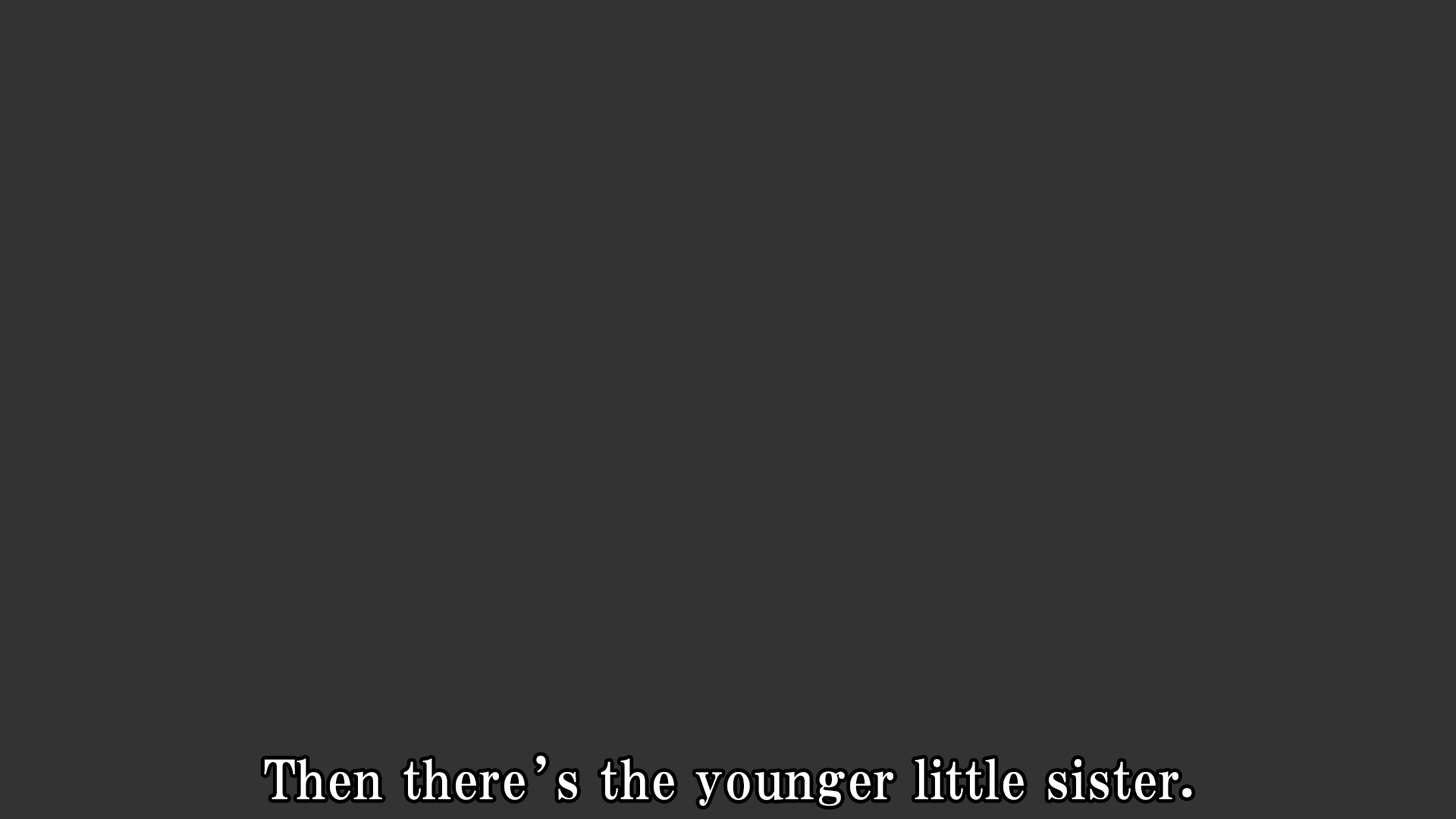
<style>
.page{position:relative;width:1456px;height:819px;background:#333333}
.page>*{position:absolute;margin:0}
.t1{font:53.1px "HGPMinchoE";letter-spacing:0.025em;color:#ffffff}
</style>
<div class="page">
<p class="t1" style="left:264px;top:755px;width:928px;height:51px">Then there’s the younger little sister.</p>
</div>
